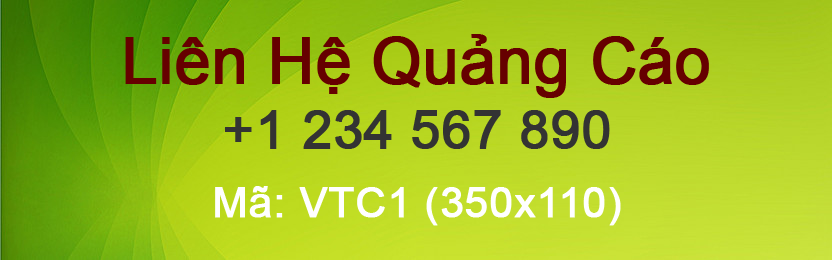
<style>
.page{position:relative;width:832px;height:260px}
.page>*{position:absolute;margin:0}
.t1{font:63.5px "ArialMT";color:#660000;font-weight:bold}
.t2{font:52.9px "ArialMT";color:#333333;font-weight:bold}
.t3{font:42.3px "ArialMT";color:#ffffff;font-weight:bold}
</style>
<div class="page">
<p class="t1" style="left:125px;top:34px;width:584px;height:64px">Liên Hệ Quảng Cáo</p>
<p class="t2" style="left:225px;top:110px;width:385px;height:39px">+1 234 567 890</p>
<p class="t3" style="left:215px;top:186px;width:406px;height:40px">Mã: VTC1 (350x110)</p>
</div>
